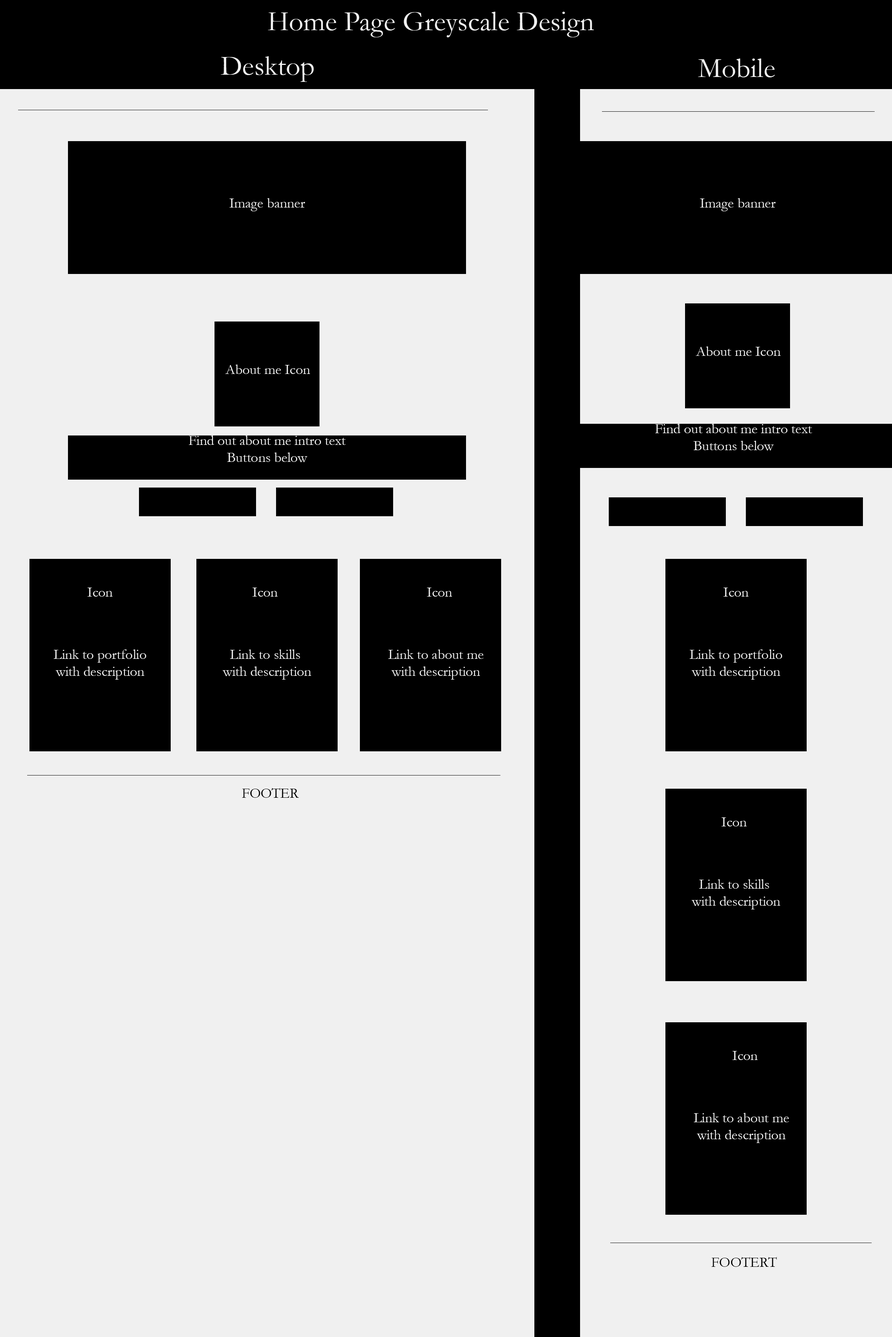
<style>
.page{position:relative;width:892px;height:1337px;background:#f0f0f0}
.page>*{position:absolute;margin:0}
.t1{font:28.3px "Garamond";color:#f0f0f0}
.t2{font:14.2px "Garamond";color:#f0f0f0}
.t3{font:14.2px "Garamond";color:#000000}
</style>
<div class="page">
<p class="t1" style="left:268px;top:12px;width:326px;height:25px">Home Page Greyscale Design</p>
<p class="t1" style="left:220px;top:56px;width:94px;height:26px">Desktop</p>
<p class="t1" style="left:698px;top:59px;width:77px;height:18px">Mobile</p>
<p class="t2" style="left:229px;top:198px;width:76px;height:13px">Image banner</p>
<p class="t2" style="left:699px;top:198px;width:76px;height:13px">Image banner</p>
<p class="t2" style="left:695px;top:347px;width:85px;height:9px">About me Icon</p>
<p class="t2" style="left:225px;top:365px;width:85px;height:9px">About me Icon</p>
<p class="t2" style="left:655px;top:424px;width:157px;height:27px;text-align:center">Find out about me intro text<br>Buttons below</p>
<p class="t2" style="left:189px;top:436px;width:157px;height:26px;text-align:center">Find out about me intro text<br>Buttons below</p>
<p class="t2" style="left:87px;top:588px;width:25px;height:9px">Icon</p>
<p class="t2" style="left:252px;top:588px;width:25px;height:9px">Icon</p>
<p class="t2" style="left:427px;top:588px;width:25px;height:9px">Icon</p>
<p class="t2" style="left:723px;top:588px;width:25px;height:9px">Icon</p>
<p class="t2" style="left:54px;top:650px;width:92px;height:30px;text-align:center">Link to portfolio<br>with description</p>
<p class="t2" style="left:222px;top:650px;width:89px;height:30px;text-align:center">Link to skills <br>with description</p>
<p class="t2" style="left:388px;top:650px;width:95px;height:30px;text-align:center">Link to about me<br>with description</p>
<p class="t2" style="left:689px;top:650px;width:93px;height:30px;text-align:center">Link to portfolio<br>with description</p>
<p class="t3" style="left:242px;top:788px;width:57px;height:10px">FOOTER</p>
<p class="t2" style="left:721px;top:818px;width:25px;height:9px">Icon</p>
<p class="t2" style="left:691px;top:880px;width:89px;height:30px;text-align:center">Link to skills <br>with description</p>
<p class="t2" style="left:732px;top:1051px;width:25px;height:9px">Icon</p>
<p class="t2" style="left:693px;top:1113px;width:96px;height:30px;text-align:center">Link to about me<br>with description</p>
<p class="t3" style="left:711px;top:1257px;width:65px;height:10px">FOOTERT</p>
</div>
